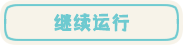
<style>
.page{position:relative;width:183px;height:45px;background:#f7f3e9}
.page>*{position:absolute;margin:0}
.t1{font:12px "shetumodengxiaofangti";color:#6ecad0;font-weight:bold;scale:0.94 1}
</style>
<div class="page">
<p class="t1" style="left:54px;top:13px;width:76px;height:19px">继续运行</p>
</div>
